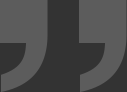
<style>
.page{position:relative;width:127px;height:92px;background:#5c5c5c}
.page>*{position:absolute;margin:0}
.t1{font:338.4px "HelveticaLTStd-Bold";color:#5c5c5c;text-transform:uppercase}
</style>
<div class="page">
<p class="t1" style="left:0px;top:0px;width:127px;height:92px;rotate:180deg">“</p>
</div>
